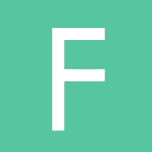
<style>
.page{position:relative;width:152px;height:152px;background:#57c5a0}
.page>*{position:absolute;margin:0}
.t1{font:140px "STHeitiSC-Medium";letter-spacing:-0.025em;color:#ffffff;text-transform:uppercase}
</style>
<div class="page">
<p class="t1" style="left:52px;top:28px;width:53px;height:103px">F</p>
</div>
